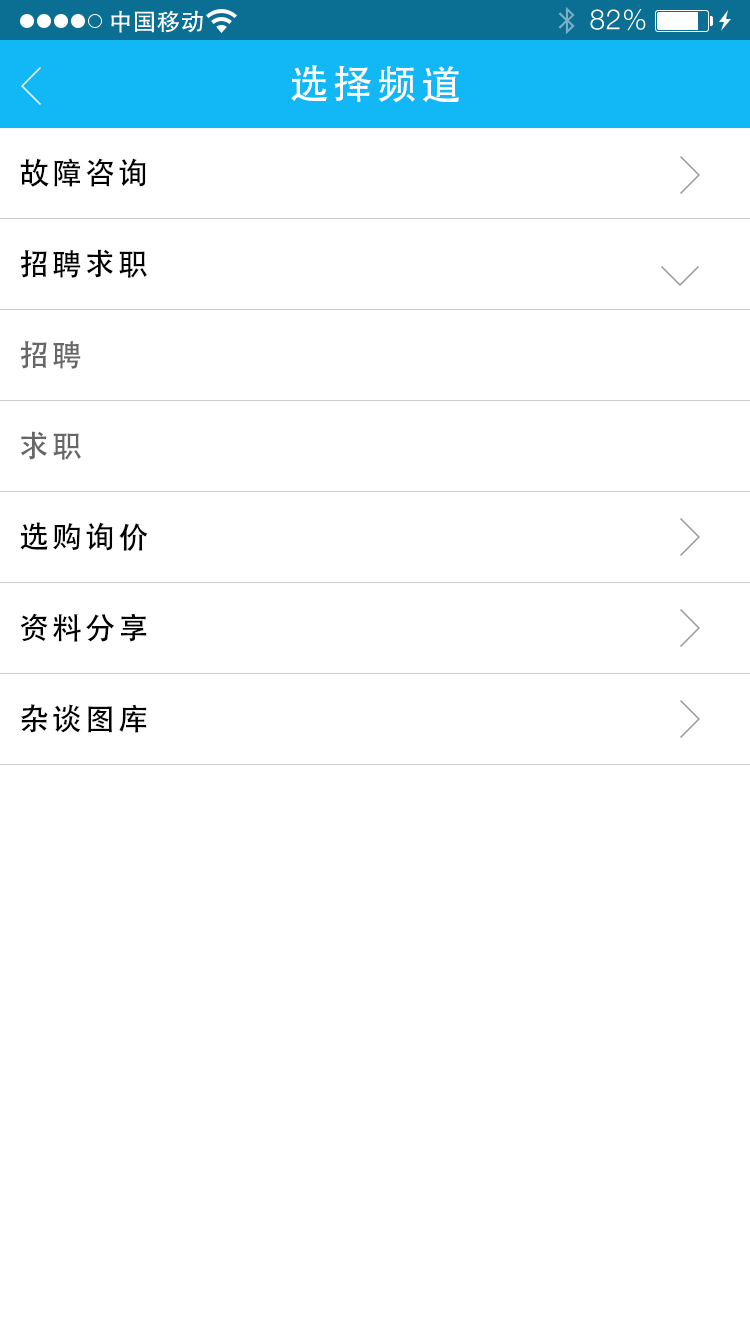
<style>
.page{position:relative;width:750px;height:1334px;background:#ffffff}
.page>*{position:absolute;margin:0}
.t1{font:40px "AdobeHeitiStd-Regular";letter-spacing:0.104em;color:#ffffff}
.t2{font:30px "AdobeHeitiStd-Regular";letter-spacing:0.104em;color:#000000}
.t3{font:30px "AdobeHeitiStd-Regular";letter-spacing:0.104em;color:#666666}
</style>
<div class="page">
<p class="t1" style="left:291px;top:65px;width:168px;height:38px">选择频道</p>
<p class="t2" style="left:20px;top:158px;width:126px;height:29px">故障咨询</p>
<p class="t2" style="left:20px;top:249px;width:127px;height:29px">招聘求职</p>
<p class="t3" style="left:20px;top:341px;width:61px;height:28px">招聘</p>
<p class="t3" style="left:21px;top:431px;width:60px;height:29px">求职</p>
<p class="t2" style="left:20px;top:522px;width:128px;height:29px">选购询价</p>
<p class="t2" style="left:20px;top:613px;width:127px;height:29px">资料分享</p>
<p class="t2" style="left:21px;top:704px;width:126px;height:29px">杂谈图库</p>
</div>
